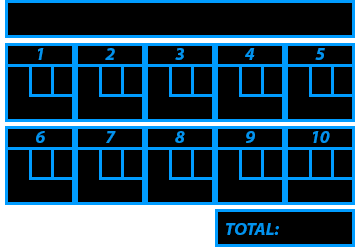
<style>
.page{position:relative;width:360px;height:247px;background:#000000}
.page>*{position:absolute;margin:0}
.t1{font:17.9px "MyriadPro-BoldIt";color:#0293ef}
</style>
<div class="page">
<p class="t1" style="left:38px;top:48px;width:6px;height:12px">1</p>
<p class="t1" style="left:105px;top:48px;width:10px;height:12px">2</p>
<p class="t1" style="left:175px;top:48px;width:9px;height:12px">3</p>
<p class="t1" style="left:245px;top:48px;width:10px;height:12px">4</p>
<p class="t1" style="left:315px;top:48px;width:10px;height:12px">5</p>
<p class="t1" style="left:36px;top:131px;width:9px;height:12px">6</p>
<p class="t1" style="left:106px;top:131px;width:10px;height:12px">7</p>
<p class="t1" style="left:175px;top:131px;width:10px;height:12px">8</p>
<p class="t1" style="left:246px;top:131px;width:9px;height:12px">9</p>
<p class="t1" style="left:313px;top:131px;width:17px;height:12px">10</p>
<p class="t1" style="left:226px;top:223px;width:53px;height:12px">TOTAL:</p>
</div>
